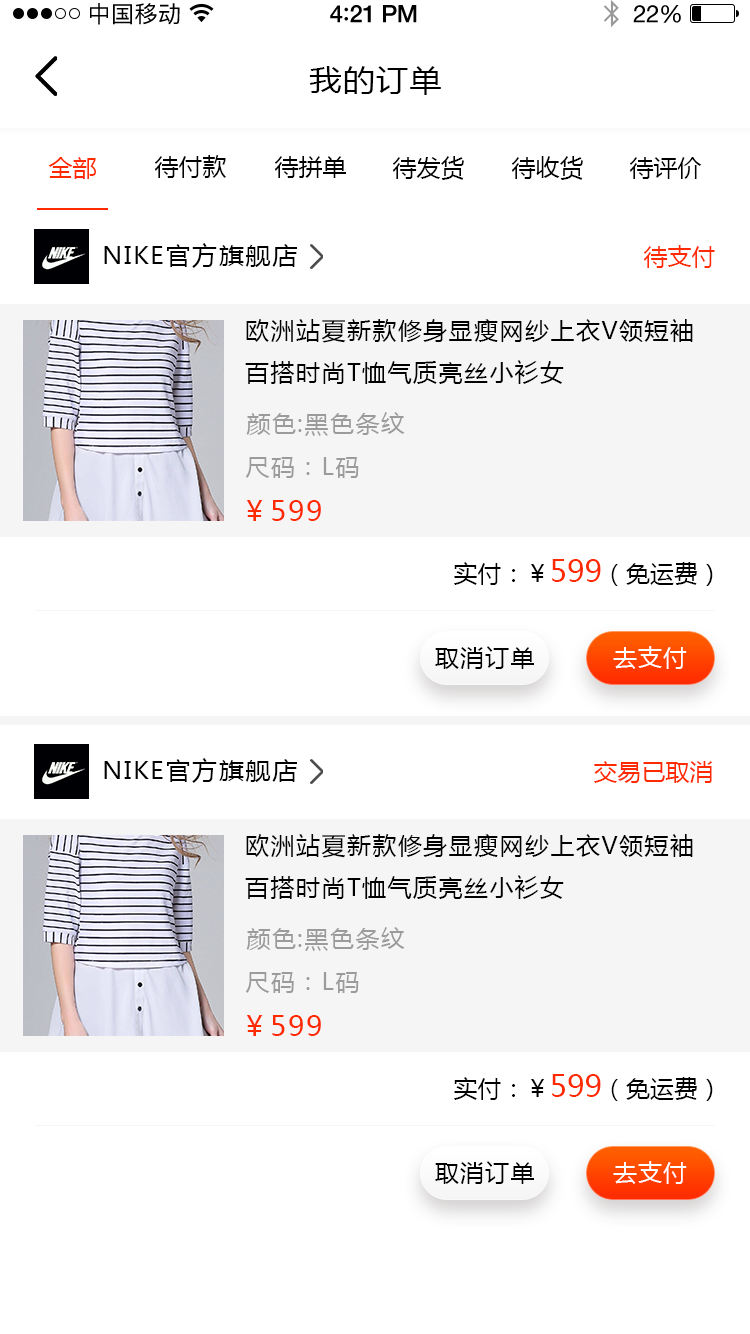
<style>
.page{position:relative;width:750px;height:1334px;background:#ffffff}
.page>*{position:absolute;margin:0}
.t1{font:23px "PingFangSC-Regular";letter-spacing:0.02em;color:#000000}
.t2{font:24px "HelveticaNeue-Medium";letter-spacing:-0.02em;color:#000000}
.t3{font:26px "Avenir-Medium";letter-spacing:-0.02em;color:#000000}
.t4{font:24px "HelveticaNeue";letter-spacing:-0.02em;color:#000000}
.t5{font:30px "MicrosoftYaHei";letter-spacing:0.05em;color:#000000;scale:1.06 1}
.t6{font:24px "MicrosoftYaHei";color:#ff2a00;text-transform:uppercase}
.t7{font:24px "MicrosoftYaHei";color:#000000;text-transform:uppercase}
.t8{font:24px "MicrosoftYaHei";letter-spacing:0.05em;color:#000000;scale:1.06 1}
.t9{font:24px "MicrosoftYaHei";letter-spacing:0.06em;color:#000000;text-transform:uppercase}
.t10{font:24px "MicrosoftYaHei";letter-spacing:0.06em;color:#9b9b9b;text-transform:uppercase}
.t11{font:28px "MicrosoftYaHei";letter-spacing:0.06em;color:#ff2a00;text-transform:uppercase}
.t12{font:30px "MicrosoftYaHei";color:#ff2a00;text-transform:uppercase}
.t13{font:24px "MicrosoftYaHei";letter-spacing:0.05em;color:#000000;text-transform:uppercase}
.t14{font:24px "MicrosoftYaHei";letter-spacing:0.05em;color:#ffffff;text-transform:uppercase}
</style>
<div class="page">
<p class="t1" style="left:90px;top:3px;width:90px;height:22px">中国移动</p>
<p class="t2" style="left:330px;top:5px;width:87px;height:18px">4<span class="t3">:</span>21 PM</p>
<p class="t4" style="left:633px;top:5px;width:48px;height:18px">22%</p>
<p class="t5" style="left:309px;top:66px;width:132px;height:29px">我的订单</p>
<p class="t6" style="left:48px;top:157px;width:48px;height:22px">全部</p>
<p class="t7" style="left:154px;top:155px;width:72px;height:23px">待付款</p>
<p class="t7" style="left:274px;top:156px;width:72px;height:22px">待拼单</p>
<p class="t7" style="left:392px;top:156px;width:72px;height:24px">待发货</p>
<p class="t7" style="left:511px;top:156px;width:72px;height:24px">待收货</p>
<p class="t7" style="left:629px;top:157px;width:73px;height:22px">待评价</p>
<p class="t8" style="left:104px;top:243px;width:193px;height:25px">NIKE官方旗舰店</p>
<p class="t6" style="left:643px;top:245px;width:72px;height:23px">待支付</p>
<p class="t9" style="left:245px;top:319px;width:448px;height:65px">欧洲站夏新款修身显瘦网纱上衣v领短袖百搭时尚t恤气质亮丝小衫女</p>
<p class="t10" style="left:246px;top:412px;width:159px;height:24px">颜色:黑色条纹</p>
<p class="t10" style="left:245px;top:457px;width:114px;height:21px">尺码：L码</p>
<p class="t11" style="left:246px;top:500px;width:75px;height:21px">￥599</p>
<p class="t7" style="left:454px;top:559px;width:259px;height:27px">实付：￥<span class="t12">599</span>（免运费）</p>
<p class="t13" style="left:435px;top:646px;width:99px;height:23px">取消订单</p>
<p class="t14" style="left:613px;top:646px;width:74px;height:23px">去支付</p>
<p class="t8" style="left:104px;top:758px;width:193px;height:25px">NIKE官方旗舰店</p>
<p class="t6" style="left:594px;top:761px;width:119px;height:22px">交易已取消</p>
<p class="t9" style="left:245px;top:834px;width:448px;height:65px">欧洲站夏新款修身显瘦网纱上衣v领短袖百搭时尚t恤气质亮丝小衫女</p>
<p class="t10" style="left:246px;top:927px;width:159px;height:24px">颜色:黑色条纹</p>
<p class="t10" style="left:245px;top:972px;width:114px;height:21px">尺码：L码</p>
<p class="t11" style="left:246px;top:1015px;width:75px;height:21px">￥599</p>
<p class="t7" style="left:454px;top:1074px;width:259px;height:27px">实付：￥<span class="t12">599</span>（免运费）</p>
<p class="t13" style="left:435px;top:1161px;width:99px;height:23px">取消订单</p>
<p class="t14" style="left:613px;top:1161px;width:74px;height:23px">去支付</p>
</div>
